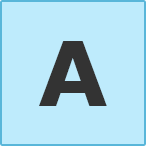
<style>
.page{position:relative;width:146px;height:146px;background:#beebfc}
.page>*{position:absolute;margin:0}
.t1{font:90px "Verdana-Bold";color:#333333}
</style>
<div class="page">
<p class="t1" style="left:39px;top:41px;width:68px;height:65px">A</p>
</div>
